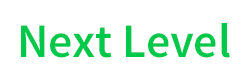
<style>
.page{position:relative;width:250px;height:80px;background:#ffffff}
.page>*{position:absolute;margin:0}
.t1{font:48px "SourceSansPro-Semibold";color:#00c84b}
</style>
<div class="page">
<p class="t1" style="left:21px;top:23px;width:209px;height:35px">Next Level</p>
</div>
